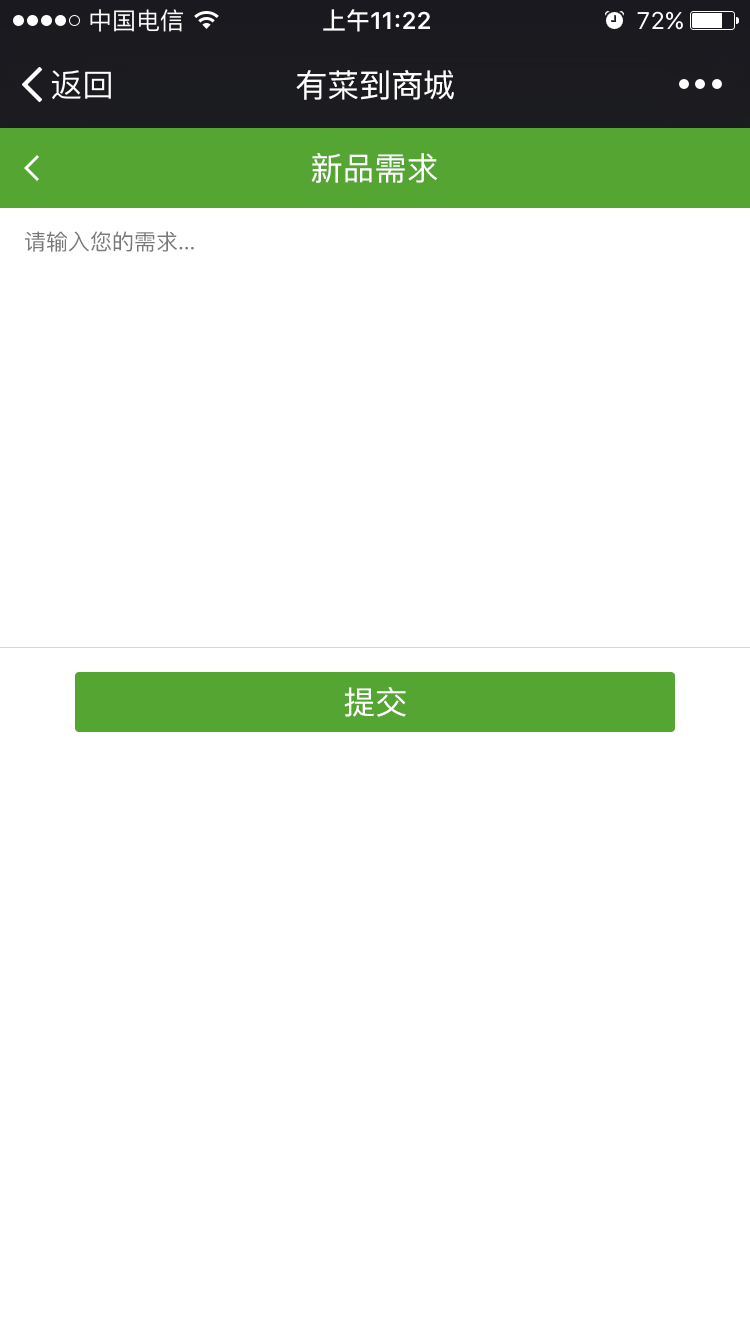
<style>
.page{position:relative;width:750px;height:1334px;background:#ffffff}
.page>*{position:absolute;margin:0}
.t1{font:32px "PingFang-SC-Medium";color:#ffffff}
.t2{font:22px "PingFang-SC-Medium";color:#787878}
</style>
<div class="page">
<p class="t1" style="left:296px;top:70px;width:158px;height:30px">有菜到商城</p>
<p class="t1" style="left:311px;top:153px;width:126px;height:30px">新品需求</p>
<p class="t2" style="left:25px;top:231px;width:169px;height:21px">请输入您的需求...</p>
<p class="t1" style="left:344px;top:687px;width:62px;height:30px">提交</p>
</div>
